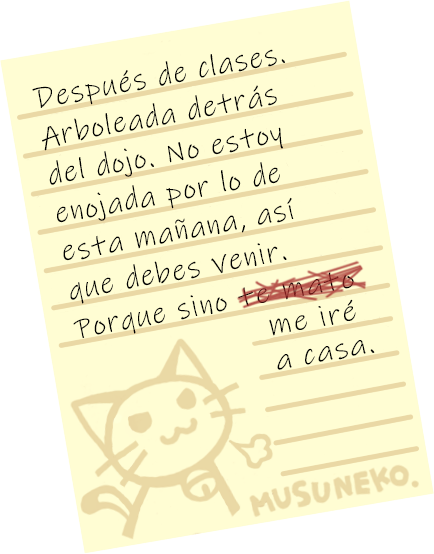
<style>
.page{position:relative;width:434px;height:554px;background:#fffdd3}
.page>*{position:absolute;margin:0}
.t1{font:30.5px/38.8px "InkFree";letter-spacing:0.05em;color:#000000}
.t2{font:29.5px "InkFree";letter-spacing:0.05em;scale:1.06 1}
.t3{font:29.5px/34.9px "InkFree";letter-spacing:0.05em;color:#000000;scale:1.06 1}
</style>
<div class="page">
<p class="t1" style="left:32px;top:49px;width:262px;height:289px;rotate:-11deg">Después de clases. <br>Arboleada detrás <br>del dojo. No estoy <br>enojada por lo de <br>esta mañana, así <br>que debes venir. <br>Porque sino</p>
<p class="t2" style="left:238px;top:272px;width:116px;height:34px;rotate:-10deg">te mato</p>
<p class="t3" style="left:269px;top:299px;width:106px;height:71px;rotate:-10deg">me iré <br>a casa.</p>
</div>
